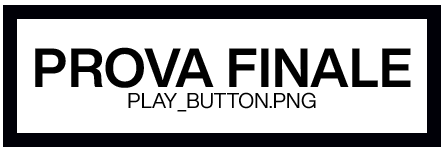
<style>
.page{position:relative;width:444px;height:149px;background:#ffffff}
.page>*{position:absolute;margin:0}
.t1{font:54px "HelveticaNowDisplay-Bold";color:#000000;text-transform:uppercase}
.t2{font:21px "HelveticaNowDisplay-Regular";color:#000000;text-transform:uppercase}
</style>
<div class="page">
<p class="t1" style="left:35px;top:47px;width:376px;height:41px">PROVA FINALE</p>
<p class="t2" style="left:128px;top:92px;width:188px;height:20px">play_button.png</p>
</div>
